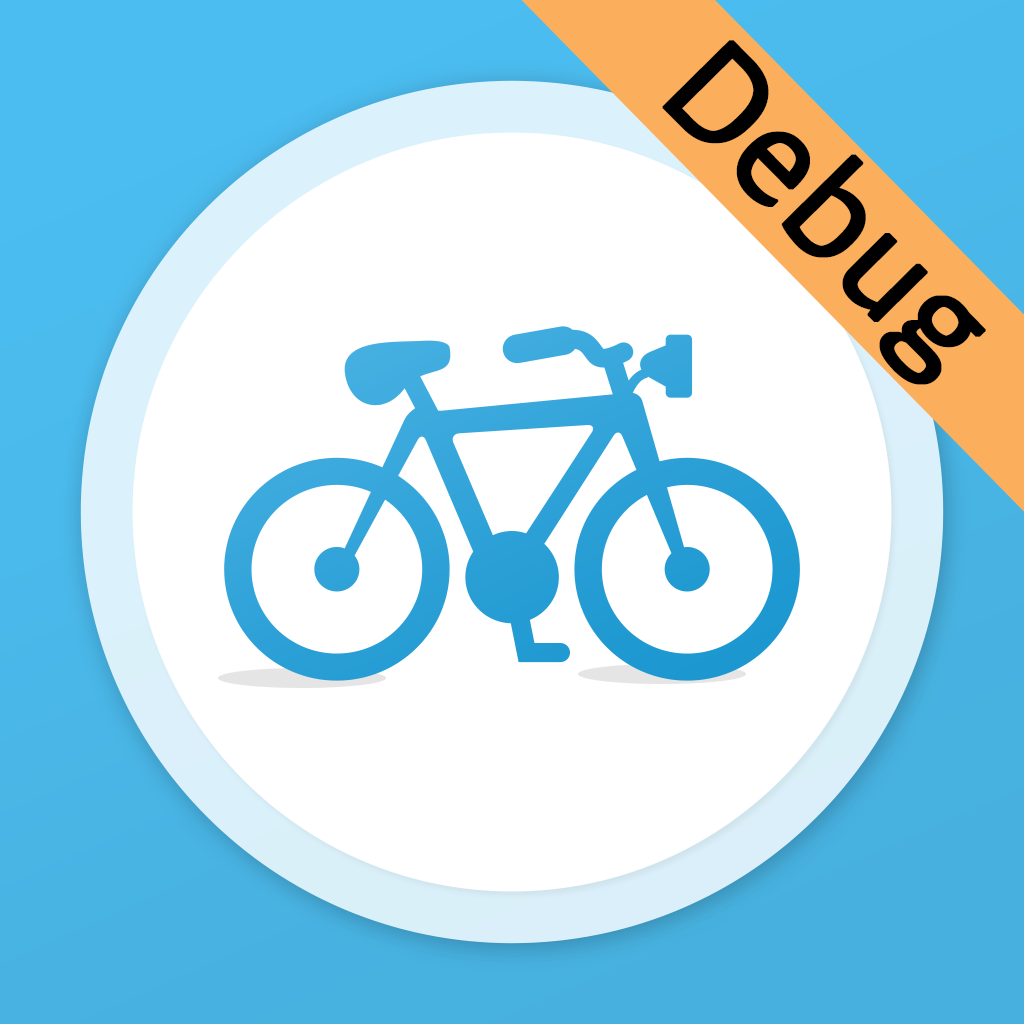
<style>
.page{position:relative;width:1024px;height:1024px;background:#ffffff}
.page>*{position:absolute;margin:0}
.t1{font:140px "AppleSDGothicNeo-Regular";color:#000000;font-weight:bold}
</style>
<div class="page">
<p class="t1" style="left:662px;top:40px;width:324px;height:345px;rotate:45deg">Debug</p>
</div>
